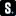
<style>
.page{position:relative;width:16px;height:16px;background:#000000}
.page>*{position:absolute;margin:0}
.t1{font:19.7px "Tungsten-Medium";color:#ffffff}
</style>
<div class="page">
<p class="t1" style="left:5px;top:2px;width:6px;height:12px">s</p>
</div>
